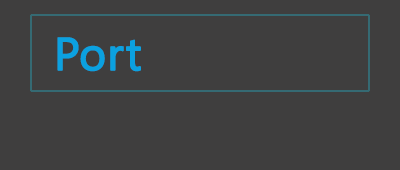
<style>
.page{position:relative;width:400px;height:170px;background:#3f3e3e}
.page>*{position:absolute;margin:0}
.t1{font:45.8px "SegoeUI";color:#0ba1e0;font-weight:bold}
</style>
<div class="page">
<p class="t1" style="left:57px;top:37px;width:84px;height:35px">Port</p>
</div>
